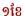
<style>
.page{position:relative;width:25px;height:16px;background:#ffffff}
.page>*{position:absolute;margin:0}
.t1{font:12px "Kh-Battambang";color:#a30000}
</style>
<div class="page">
<p class="t1" style="left:2px;top:2px;width:20px;height:15px">១ខែ</p>
</div>
